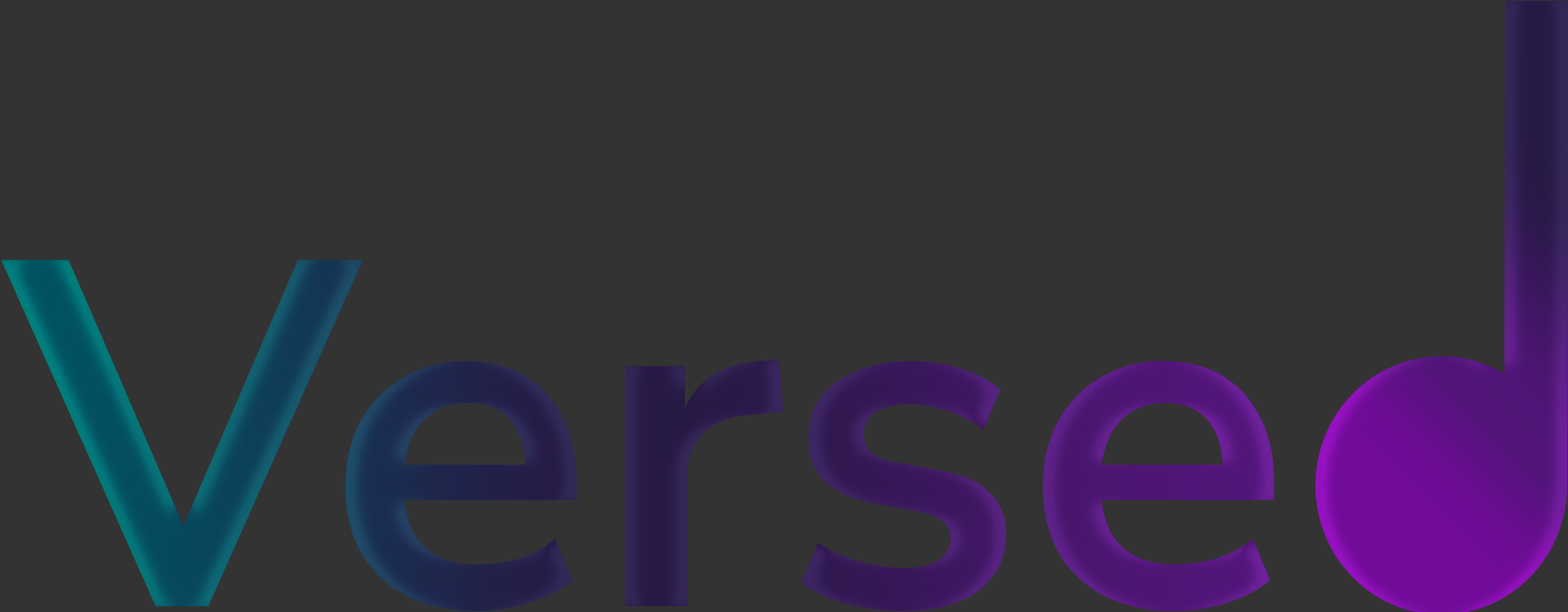
<style>
.page{position:relative;width:1568px;height:612px;background:#333333}
.page>*{position:absolute;margin:0}
.t1{font:491.8px "NunitoSans-Bold"}
</style>
<div class="page">
<p class="t1" style="left:1px;top:260px;width:1274px;height:352px">Verse</p>
</div>
